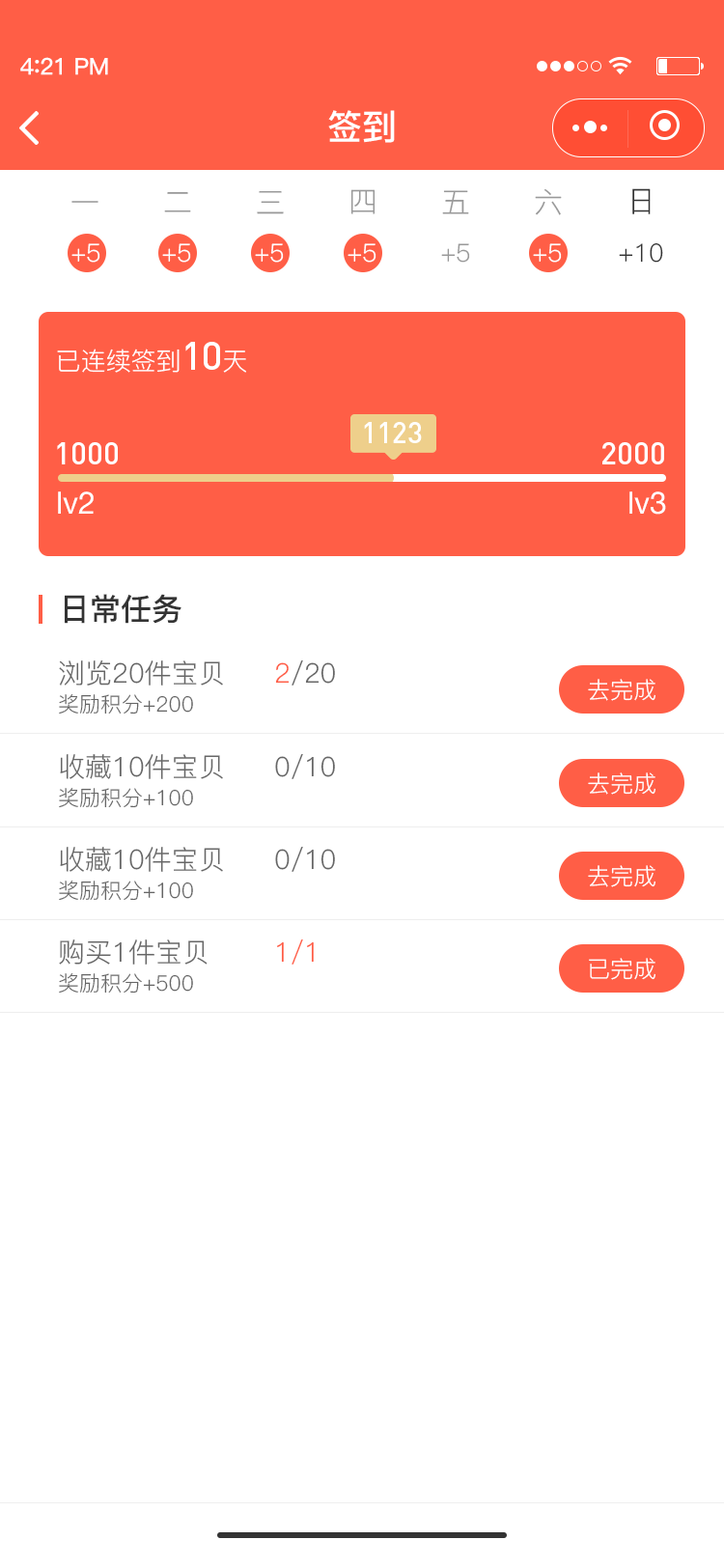
<style>
.page{position:relative;width:724px;height:1568px;background:#ffffff}
.page>*{position:absolute;margin:0}
.t1{font:23.2px "PingFang-SC-Bold";letter-spacing:-0.02em;color:#fefefe}
.t2{font:25.1px "PingFang-SC-Bold";letter-spacing:-0.02em;color:#fefefe}
.t3{font:34.8px "PingFang-SC-Bold";color:#ffffff}
.t4{font:29px "PingFang-SC-Regular";color:#999999}
.t5{font:29px "PingFang-SC-Regular";color:#333333}
.t6{font:25.1px "PingFang-SC-Regular";color:#ffffff}
.t7{font:25.1px "PingFang-SC-Regular";color:#999999}
.t8{font:25.1px "PingFang-SC-Regular";color:#333333}
.t9{font:38.6px "DIN-Medium";color:#ffffff}
.t10{font:29px "DIN-Medium";color:#ffffff}
.t11{font:30.9px "DIN-Medium";color:#ffffff}
.t12{font:30.9px "HelveticaNeue";color:#ffffff}
.t13{font:30.9px "PingFang-SC-Bold";color:#333333}
.t14{font:27px "PingFang-SC-Regular";color:#666666}
.t15{font:27px "PingFang-SC-Regular";color:#ff5e46}
.t16{font:23.2px "PingFang-SC-Regular";color:#ffffff}
.t17{font:21.2px "PingFang-SC-Regular";color:#666666}
</style>
<div class="page">
<p class="t1" style="left:20px;top:57px;width:88px;height:18px">4<span class="t2">:</span>21 PM</p>
<p class="t3" style="left:328px;top:110px;width:67px;height:33px">签到</p>
<p class="t4" style="left:164px;top:191px;width:27px;height:21px">二</p>
<p class="t4" style="left:257px;top:190px;width:27px;height:24px">三</p>
<p class="t4" style="left:350px;top:189px;width:26px;height:25px">四</p>
<p class="t4" style="left:442px;top:190px;width:27px;height:24px">五</p>
<p class="t4" style="left:535px;top:188px;width:27px;height:27px">六</p>
<p class="t5" style="left:632px;top:188px;width:19px;height:26px">日</p>
<p class="t4" style="left:71px;top:201px;width:27px;height:2px">一</p>
<p class="t6" style="left:71px;top:243px;width:29px;height:20px">+5</p>
<p class="t6" style="left:162px;top:243px;width:29px;height:20px">+5</p>
<p class="t6" style="left:255px;top:243px;width:29px;height:20px">+5</p>
<p class="t6" style="left:348px;top:243px;width:29px;height:20px">+5</p>
<p class="t7" style="left:441px;top:243px;width:29px;height:20px">+5</p>
<p class="t6" style="left:533px;top:243px;width:29px;height:20px">+5</p>
<p class="t8" style="left:619px;top:242px;width:44px;height:21px">+10</p>
<p class="t6" style="left:57px;top:342px;width:189px;height:31px">已连续签到<span class="t9">10</span>天</p>
<p class="t10" style="left:364px;top:422px;width:58px;height:21px">1123</p>
<p class="t11" style="left:57px;top:442px;width:61px;height:22px">1000</p>
<p class="t11" style="left:602px;top:442px;width:62px;height:22px">2000</p>
<p class="t12" style="left:58px;top:491px;width:36px;height:23px">lv2</p>
<p class="t12" style="left:630px;top:491px;width:36px;height:24px">lv3</p>
<p class="t13" style="left:65px;top:594px;width:117px;height:30px">日常任务</p>
<p class="t14" style="left:59px;top:660px;width:164px;height:26px">浏览20件宝贝</p>
<p class="t14" style="left:275px;top:660px;width:60px;height:26px"><span class="t15">2</span>/20</p>
<p class="t16" style="left:588px;top:679px;width:68px;height:22px">去完成</p>
<p class="t17" style="left:59px;top:694px;width:134px;height:20px">奖励积分+200</p>
<p class="t14" style="left:60px;top:754px;width:163px;height:25px">收藏10件宝贝</p>
<p class="t14" style="left:275px;top:754px;width:60px;height:25px">0/10</p>
<p class="t16" style="left:588px;top:772px;width:68px;height:23px">去完成</p>
<p class="t17" style="left:59px;top:788px;width:134px;height:20px">奖励积分+100</p>
<p class="t14" style="left:60px;top:847px;width:163px;height:25px">收藏10件宝贝</p>
<p class="t14" style="left:275px;top:847px;width:60px;height:25px">0/10</p>
<p class="t16" style="left:588px;top:865px;width:68px;height:22px">去完成</p>
<p class="t17" style="left:59px;top:881px;width:134px;height:20px">奖励积分+100</p>
<p class="t14" style="left:59px;top:939px;width:149px;height:26px">购买1件宝贝</p>
<p class="t15" style="left:277px;top:939px;width:37px;height:26px">1/1</p>
<p class="t16" style="left:589px;top:958px;width:67px;height:22px">已完成</p>
<p class="t17" style="left:59px;top:973px;width:134px;height:21px">奖励积分+500</p>
</div>
